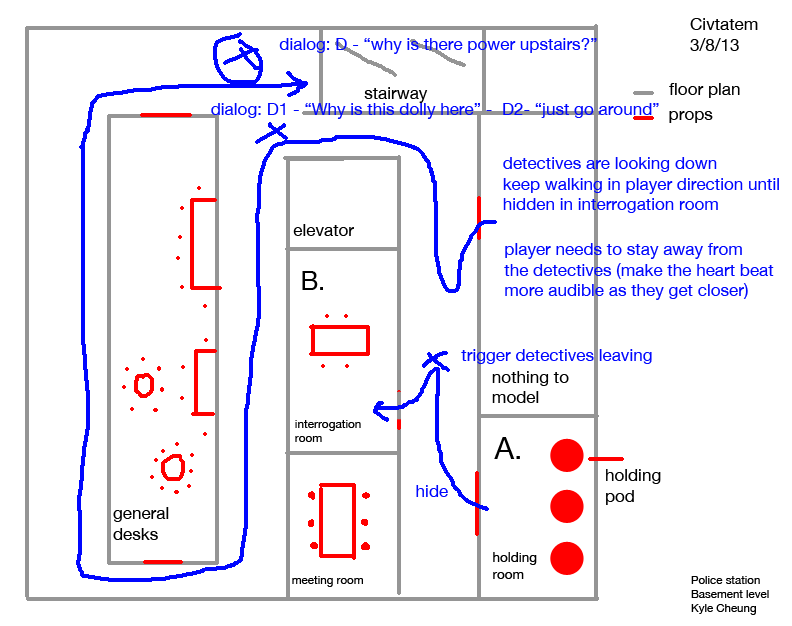
<style>
.page{position:relative;width:792px;height:626px;background:#ffffff}
.page>*{position:absolute;margin:0}
.t1{font:17.1px "HelveticaNeue";color:#000000}
.t2{font:17.1px "HelveticaNeue";color:#0006ff}
.t3{font:26.1px "HelveticaNeue";color:#000000}
.t4{font:11.8px "HelveticaNeue";color:#000000}
.t5{font:30.2px "HelveticaNeue";color:#000000}
.t6{font:13.5px "HelveticaNeue";color:#000000}
.t7{font:11.6px "HelveticaNeue";color:#000000}
.t8{font:11.5px "HelveticaNeue";color:#000000}
</style>
<div class="page">
<p class="t1" style="left:690px;top:18px;width:68px;height:33px">Civtatem<br>3/8/13</p>
<p class="t2" style="left:279px;top:38px;width:318px;height:16px">dialog: D - “why is there power upstairs?”</p>
<p class="t1" style="left:364px;top:87px;width:64px;height:16px">stairway</p>
<p class="t1" style="left:669px;top:83px;width:71px;height:15px">floor plan</p>
<p class="t2" style="left:211px;top:103px;width:448px;height:16px">dialog: D1 - “Why is this dolly here” -  D2- “just go around”</p>
<p class="t1" style="left:669px;top:111px;width:44px;height:12px">props</p>
<p class="t2" style="left:503px;top:157px;width:276px;height:56px">detectives are looking down<br>keep walking in player direction until<br>hidden in interrogation room</p>
<p class="t1" style="left:293px;top:224px;width:61px;height:12px">elevator</p>
<p class="t2" style="left:504px;top:243px;width:270px;height:57px">player needs to stay away from<br>the detectives (make the heart beat<br>more audible as they get closer)</p>
<p class="t3" style="left:302px;top:271px;width:21px;height:19px">B.</p>
<p class="t2" style="left:461px;top:349px;width:191px;height:15px">trigger detectives leaving</p>
<p class="t1" style="left:492px;top:371px;width:77px;height:32px">nothing to<br>model</p>
<p class="t4" style="left:295px;top:420px;width:66px;height:22px">interrogation<br>room</p>
<p class="t5" style="left:494px;top:437px;width:26px;height:22px">A.</p>
<p class="t1" style="left:606px;top:469px;width:55px;height:36px">holding<br>pod</p>
<p class="t2" style="left:416px;top:485px;width:32px;height:12px">hide</p>
<p class="t1" style="left:113px;top:507px;width:56px;height:33px">general<br>desks</p>
<p class="t6" style="left:493px;top:552px;width:44px;height:27px">holding<br>room</p>
<p class="t7" style="left:292px;top:576px;width:71px;height:11px">meeting room</p>
<p class="t8" style="left:691px;top:576px;width:78px;height:39px">Police station<br>Basement level<br>Kyle Cheung</p>
</div>
